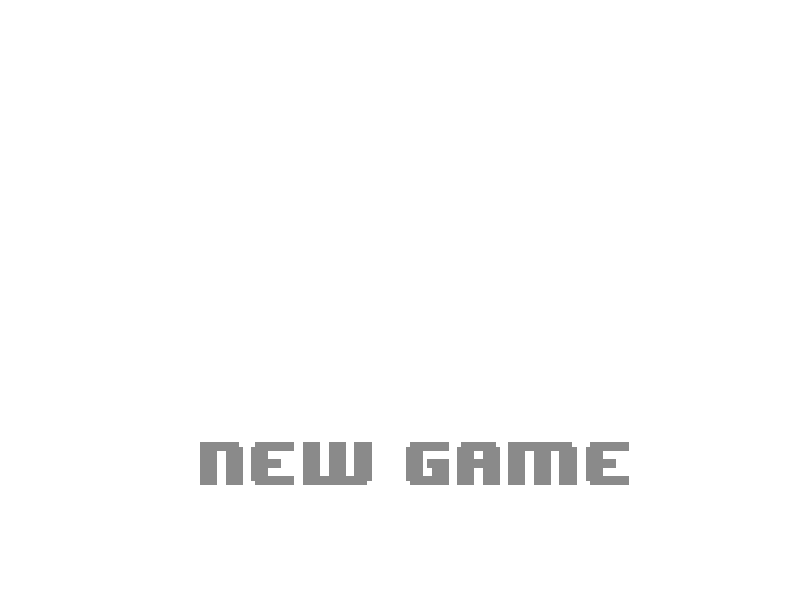
<style>
.page{position:relative;width:800px;height:600px;background:#ffffff}
.page>*{position:absolute;margin:0}
.t1{font:51.3px "8BITWONDERNominal";color:#8a8a8a}
</style>
<div class="page">
<p class="t1" style="left:200px;top:442px;width:429px;height:43px">NEW GAME</p>
</div>
